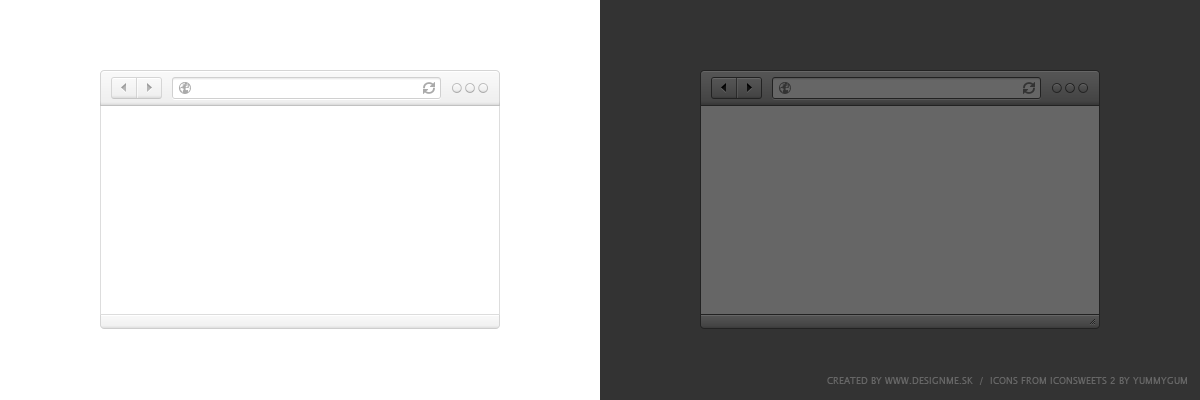
<style>
.page{position:relative;width:1200px;height:400px;background:#ffffff}
.page>*{position:absolute;margin:0}
.t1{font:9px "LucidaGrande";color:#666666}
</style>
<div class="page">
<p class="t1" style="left:827px;top:377px;width:360px;height:8px">CREATED BY WWW.DESIGNME.SK  /  ICONS FROM ICONSWEETS 2 BY YUMMYGUM</p>
</div>
